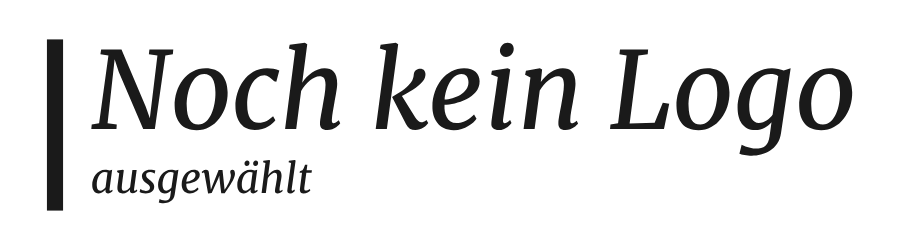
<style>
.page{position:relative;width:900px;height:250px;background:#ffffff}
.page>*{position:absolute;margin:0}
.t1{font:107px "Merriweather-Italic";color:#1a1a1a}
.t2{font:41px "Merriweather-Italic";color:#1a1a1a}
</style>
<div class="page">
<p class="t1" style="left:91px;top:42px;width:762px;height:114px">Noch kein Logo</p>
<p class="t2" style="left:92px;top:159px;width:220px;height:45px">ausgewählt</p>
</div>
